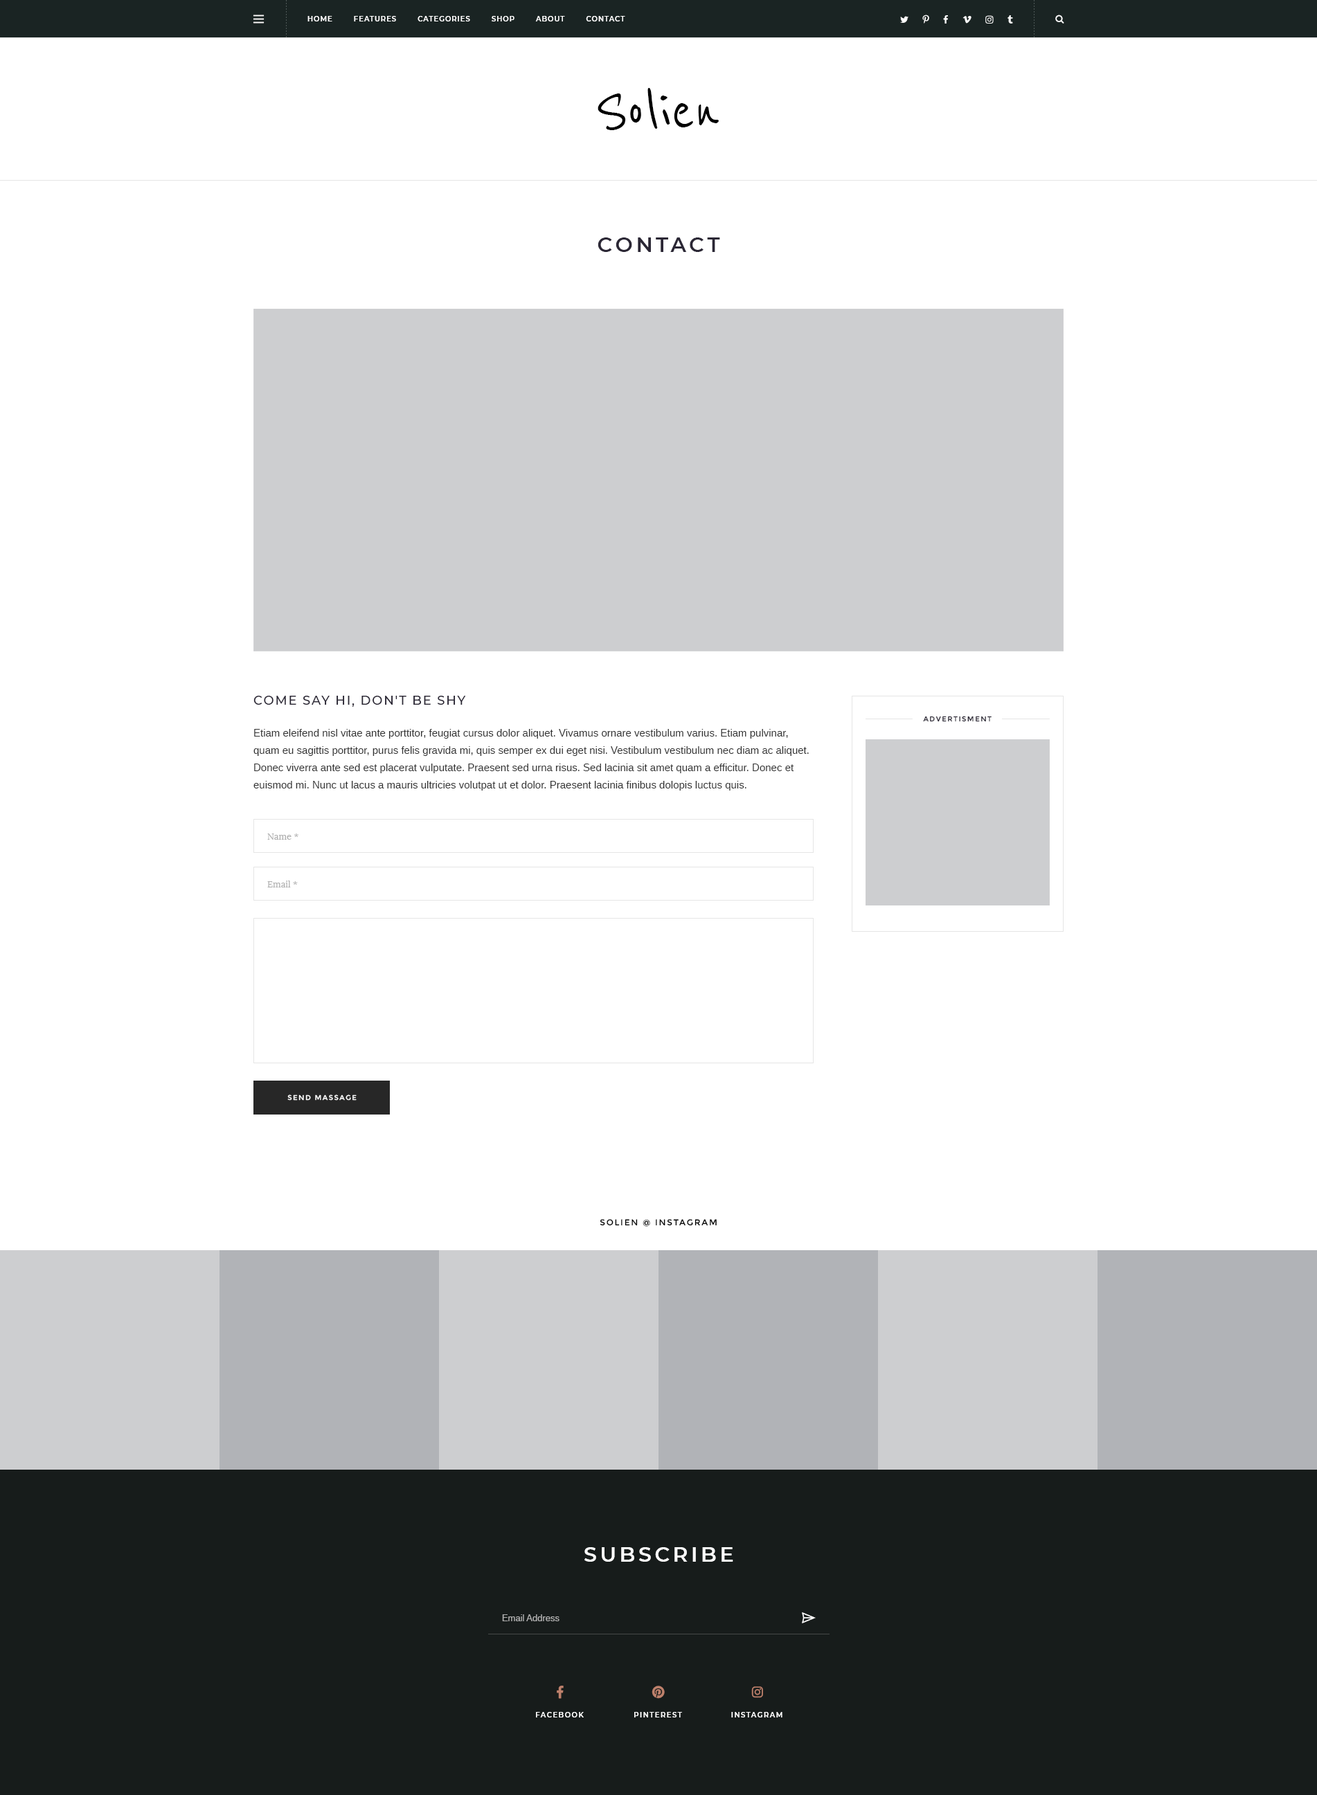
<style>
.page{position:relative;width:1317px;height:1795px;background:#ffffff}
.page>*{position:absolute;margin:0}
.t1{font:6.9px "Montserrat-SemiBold";letter-spacing:0.1em;color:#ffffff;text-transform:uppercase}
.t2{font:69.2px "ReenieBeanie";color:#000000}
.t3{font:20.8px "Montserrat-SemiBold";letter-spacing:0.15em;color:#2b2735;text-transform:uppercase}
.t4{font:12.5px "Montserrat-Medium";letter-spacing:0.1em;color:#2b2735;text-transform:uppercase}
.t5{font:6.9px "Montserrat-Regular";letter-spacing:0.15em;color:#2b2735;text-transform:uppercase}
.t6{font:10.4px/17.3px "Arimo";color:#333333}
.t7{font:9px "Lora";color:#b0b0b0}
.t8{font:6.9px "Montserrat-Regular";letter-spacing:0.15em;color:#ffffff;text-transform:uppercase}
.t9{font:8.3px "Montserrat-Regular";letter-spacing:0.15em;color:#000000;text-transform:uppercase}
.t10{font:20.8px "Montserrat-SemiBold";letter-spacing:0.15em;color:#ffffff;text-transform:uppercase}
.t11{font:9px "Arimo";color:#b0b0b0}
.t12{font:6.9px "Montserrat-SemiBold";letter-spacing:0.15em;color:#ffffff;text-transform:uppercase}
</style>
<div class="page">
<p class="t1" style="left:307px;top:16px;width:318px;height:5px">Home        Features        Categories        Shop        About        Contact</p>
<p class="t2" style="left:597px;top:88px;width:122px;height:42px">Solien</p>
<p class="t3" style="left:597px;top:237px;width:123px;height:15px">contact</p>
<p class="t4" style="left:253px;top:696px;width:213px;height:11px">COME SAY HI, DON'T BE SHY</p>
<p class="t5" style="left:923px;top:716px;width:68px;height:6px">Advertisment</p>
<p class="t6" style="left:253px;top:729px;width:556px;height:62px">Etiam eleifend nisl vitae ante porttitor, feugiat cursus dolor aliquet. Vivamus ornare vestibulum varius. Etiam pulvinar, quam eu sagittis porttitor, purus felis gravida mi, quis semper ex dui eget nisi. Vestibulum vestibulum nec diam ac aliquet. Donec viverra ante sed est placerat vulputate. Praesent sed urna risus. Sed lacinia sit amet quam a efficitur. Donec et euismod mi. Nunc ut lacus a mauris ultricies volutpat ut et dolor. Praesent lacinia finibus dolopis luctus quis.</p>
<p class="t7" style="left:267px;top:834px;width:31px;height:6px">Name *</p>
<p class="t7" style="left:267px;top:881px;width:31px;height:7px">Email *</p>
<p class="t8" style="left:287px;top:1095px;width:70px;height:6px">Send massage</p>
<p class="t9" style="left:600px;top:1219px;width:117px;height:8px">Solien @ Instagram</p>
<p class="t10" style="left:584px;top:1547px;width:149px;height:15px">SUBSCRIBE</p>
<p class="t11" style="left:502px;top:1614px;width:57px;height:7px">Email Address</p>
<p class="t12" style="left:536px;top:1712px;width:48px;height:6px">Facebook</p>
<p class="t12" style="left:634px;top:1712px;width:48px;height:6px">Pinterest</p>
<p class="t12" style="left:731px;top:1712px;width:51px;height:6px">Instagram</p>
</div>
